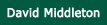
<style>
.page{position:relative;width:107px;height:25px;background:#005941}
.page>*{position:absolute;margin:0}
.t1{font:12px "Tahoma";letter-spacing:0.02em;color:#ffffff;font-weight:bold}
</style>
<div class="page">
<p class="t1" style="left:7px;top:7px;width:93px;height:11px">David Middleton</p>
</div>
